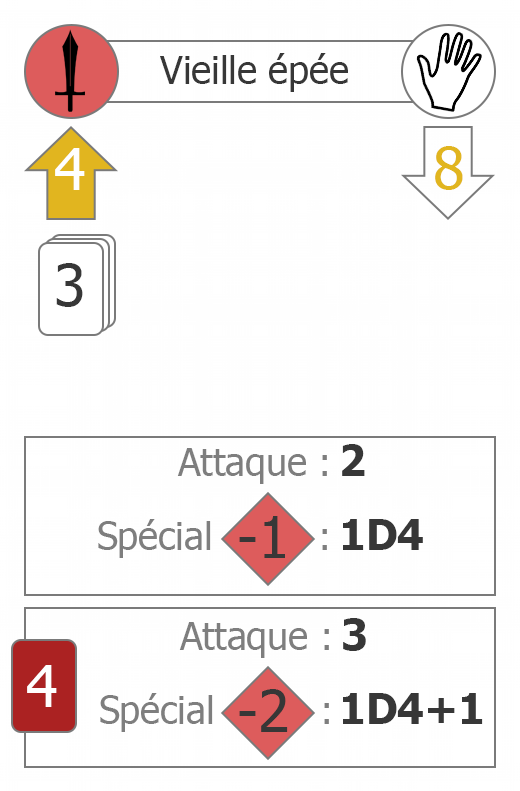
<style>
.page{position:relative;width:520px;height:791px;background:#fefefe}
.page>*{position:absolute;margin:0}
.t1{font:37.5px "Tahoma";color:#373737}
.t2{font:58.3px "Tahoma";color:#ffffff}
.t3{font:58.3px "Tahoma";color:#e1b61f}
.t4{font:58.3px "Tahoma";color:#373737}
.t5{font:37.5px "Tahoma";color:#7e7e7e}
.t6{font:41.7px "Tahoma-Bold";color:#373737}
</style>
<div class="page">
<p class="t1" style="left:160px;top:53px;width:188px;height:39px">Vieille épée</p>
<p class="t2" style="left:55px;top:148px;width:30px;height:42px">4</p>
<p class="t3" style="left:435px;top:146px;width:28px;height:44px">8</p>
<p class="t4" style="left:56px;top:263px;width:27px;height:44px">3</p>
<p class="t5" style="left:177px;top:448px;width:150px;height:36px">Attaque :</p>
<p class="t6" style="left:342px;top:444px;width:23px;height:32px">2</p>
<p class="t5" style="left:98px;top:519px;width:229px;height:39px">Spécial         :</p>
<p class="t4" style="left:239px;top:516px;width:46px;height:42px">-1</p>
<p class="t6" style="left:343px;top:519px;width:80px;height:31px">1D4</p>
<p class="t5" style="left:179px;top:622px;width:150px;height:36px">Attaque :</p>
<p class="t6" style="left:343px;top:618px;width:23px;height:33px">3</p>
<p class="t2" style="left:27px;top:665px;width:30px;height:42px">4</p>
<p class="t4" style="left:239px;top:689px;width:49px;height:43px">-2</p>
<p class="t5" style="left:100px;top:693px;width:229px;height:39px">Spécial         :</p>
<p class="t6" style="left:343px;top:693px;width:140px;height:31px">1D4+1</p>
</div>
